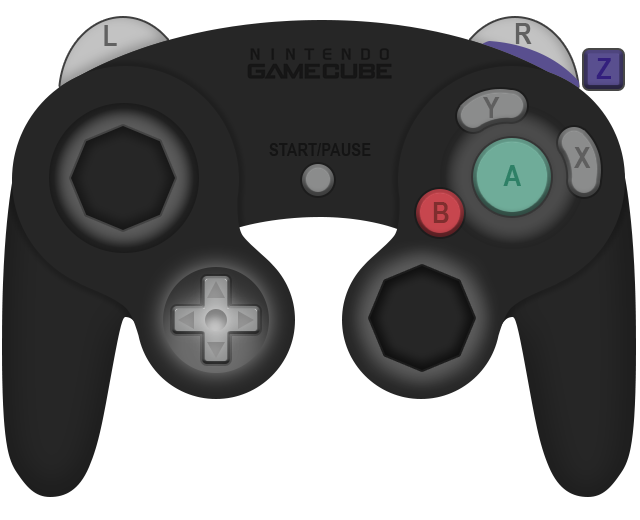
<style>
.page{position:relative;width:640px;height:520px;background:#ffffff}
.page>*{position:absolute;margin:0}
.t1{font:30px "ArialNarrow-Bold";color:#616161}
.t2{font:30px "ArialNarrow-Bold";color:#331f7d}
.t3{font:30px "ArialNarrow-Bold";color:#5f5f5f}
.t4{font:18px "ArialNarrow-Bold";color:#141414}
.t5{font:30px "ArialNarrow-Bold";color:#2e8066}
.t6{font:30px "ArialNarrow-Bold";color:#802e2e}
</style>
<div class="page">
<p class="t1" style="left:104px;top:25px;width:13px;height:21px">L</p>
<p class="t1" style="left:515px;top:23px;width:17px;height:21px">R</p>
<p class="t2" style="left:596px;top:58px;width:15px;height:21px">Z</p>
<p class="t3" style="left:483px;top:97px;width:17px;height:21px">Y</p>
<p class="t4" style="left:269px;top:143px;width:102px;height:13px">START/PAUSE</p>
<p class="t3" style="left:574px;top:147px;width:17px;height:21px">X</p>
<p class="t5" style="left:503px;top:165px;width:18px;height:21px">A</p>
<p class="t6" style="left:433px;top:202px;width:16px;height:21px">B</p>
</div>
